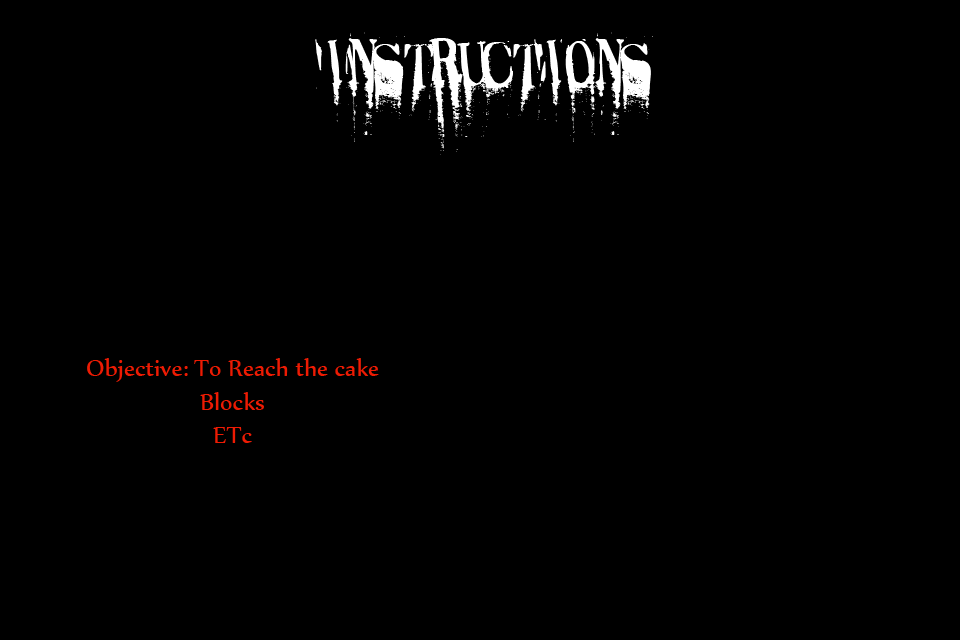
<style>
.page{position:relative;width:960px;height:640px;background:#000000}
.page>*{position:absolute;margin:0}
.t1{font:94px "Caracura";color:#ffffff}
.t2{font:28px "Nyala-Regular";color:#ed1b03}
</style>
<div class="page">
<p class="t1" style="left:315px;top:32px;width:338px;height:123px">Instructions</p>
<p class="t2" style="left:87px;top:358px;width:292px;height:85px;text-align:center">Objective: To Reach the cake<br>Blocks<br>ETc</p>
</div>
